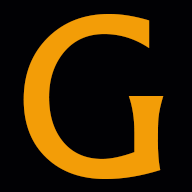
<style>
.page{position:relative;width:192px;height:192px;background:#010104}
.page>*{position:absolute;margin:0}
.t1{font:233.9px "Narkisim";color:#f39d07}
</style>
<div class="page">
<p class="t1" style="left:23px;top:14px;width:141px;height:165px">G</p>
</div>
